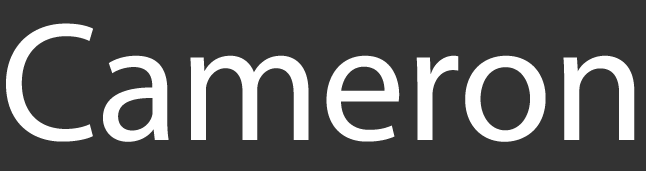
<style>
.page{position:relative;width:646px;height:171px;background:#333333}
.page>*{position:absolute;margin:0}
.t1{font:169.5px "MyriadPro-Regular";color:#ffffff}
</style>
<div class="page">
<p class="t1" style="left:6px;top:23px;width:629px;height:119px">Cameron</p>
</div>
